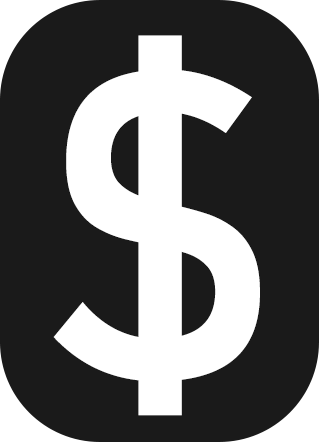
<style>
.page{position:relative;width:319px;height:442px;background:#1a1a1a}
.page>*{position:absolute;margin:0}
.t1{font:429.9px "Bahnschrift";color:#ffffff}
</style>
<div class="page">
<p class="t1" style="left:53px;top:35px;width:207px;height:381px">$</p>
</div>
